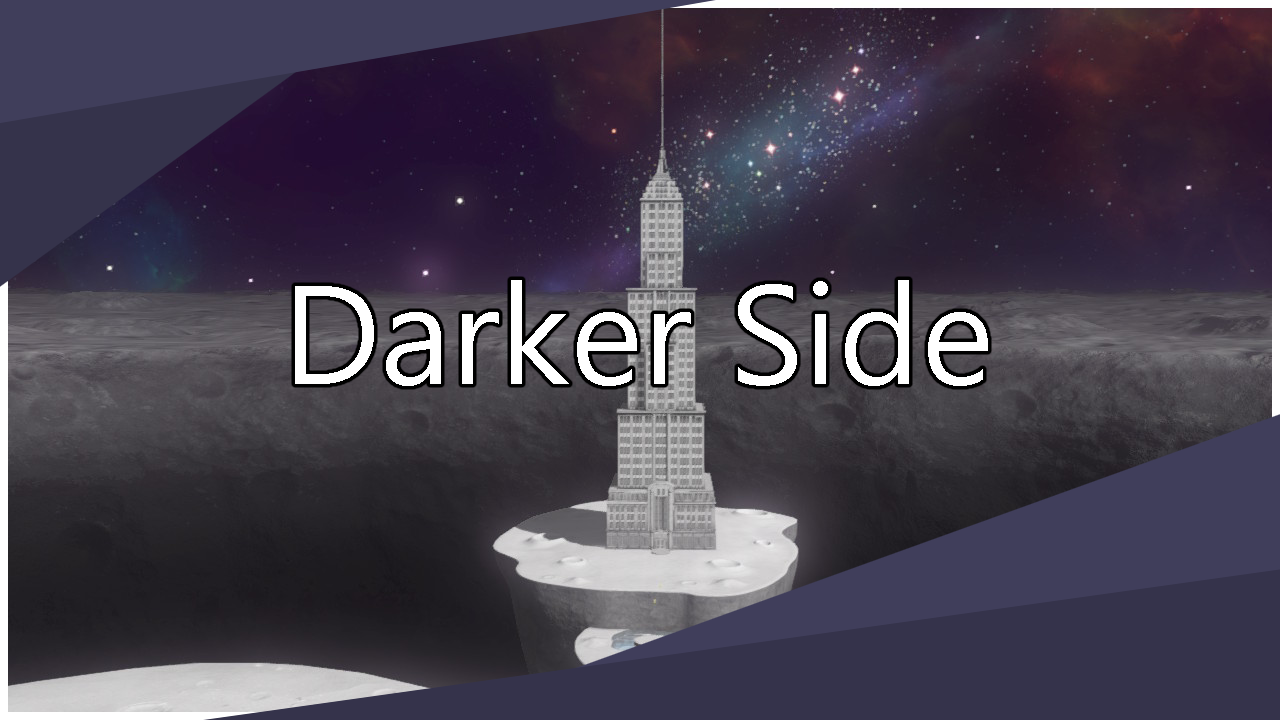
<style>
.page{position:relative;width:1280px;height:720px}
.page>*{position:absolute;margin:0}
.t1{font:140px "SegoeUI";color:#ffffff}
</style>
<div class="page">
<p class="t1" style="left:295px;top:280px;width:693px;height:106px">Darker Side</p>
</div>
